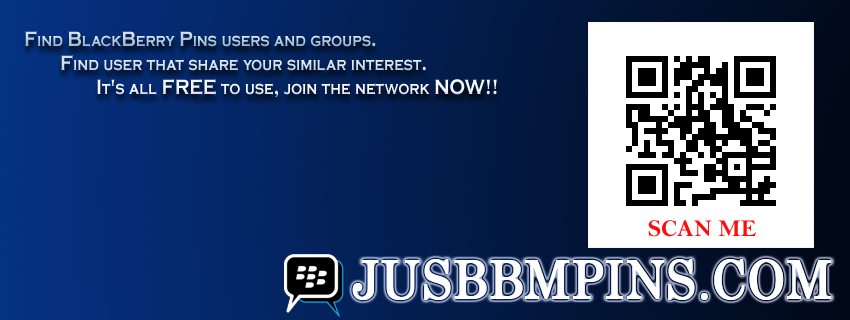
<style>
.page{position:relative;width:850px;height:320px}
.page>*{position:absolute;margin:0}
.t1{font:21.6px/24px "CopperplateGothic-Bold";font-variant:small-caps;scale:0.83 1}
.t2{font:24px "BellMTBold";color:#ff0b0b;font-variant:small-caps}
.t3{font:52.8px "Century";color:#ffffff;text-transform:uppercase;font-weight:bold;scale:0.91 1}
</style>
<div class="page">
<p class="t1" style="left:25px;top:31px;width:472px;height:67px">Find BlackBerry Pins users and groups.<br> Find user that share your similar interest. <br>  It's all FREE to use, join the network NOW!!</p>
<p class="t2" style="left:648px;top:220px;width:108px;height:17px">SCAN ME</p>
<p class="t3" style="left:352px;top:259px;width:480px;height:41px">jusbbmpins.com</p>
</div>
